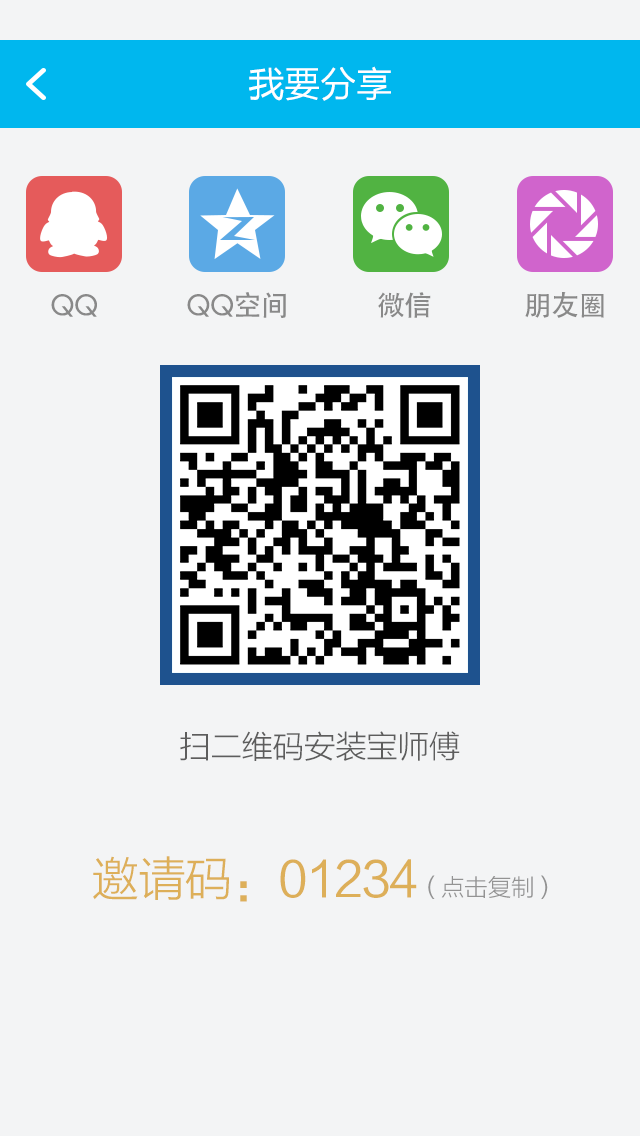
<style>
.page{position:relative;width:640px;height:1136px;background:#f3f4f5}
.page>*{position:absolute;margin:0}
.t1{font:36px "FZLTXHKM";letter-spacing:-0.025em;color:#ffffff;font-weight:bold}
.t2{font:28px "STHeiti";letter-spacing:-0.025em;color:#898989}
.t3{font:32px "FZLTXHKM";letter-spacing:-0.025em;color:#5d5d5d}
.t4{font:48px "FZLTXHKM";letter-spacing:-0.025em;color:#ddaf59}
.t5{font:24px "FZLTXHKM";letter-spacing:-0.025em;color:#939393}
</style>
<div class="page">
<p class="t1" style="left:249px;top:66px;width:142px;height:35px">我要分享</p>
<p class="t2" style="left:51px;top:294px;width:46px;height:23px">QQ</p>
<p class="t2" style="left:187px;top:292px;width:99px;height:26px">QQ空间</p>
<p class="t2" style="left:378px;top:292px;width:53px;height:26px">微信</p>
<p class="t2" style="left:525px;top:292px;width:79px;height:26px">朋友圈</p>
<p class="t3" style="left:180px;top:731px;width:280px;height:30px">扫二维码安装宝师傅</p>
<p class="t4" style="left:93px;top:856px;width:455px;height:46px">邀请码：01234<span class="t5">（点击复制）</span></p>
</div>
